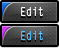
<style>
.page{position:relative;width:59px;height:48px;background:#000000}
.page>*{position:absolute;margin:0}
.t1{font:12.2px "LetterGothicStd";color:#ffffff;scale:0.82 1}
.t2{font:12.2px "LetterGothicStd";color:#5ac3ff;scale:0.82 1}
</style>
<div class="page">
<p class="t1" style="left:21px;top:6px;width:22px;height:10px">Edit</p>
<p class="t2" style="left:21px;top:30px;width:22px;height:10px">Edit</p>
</div>
